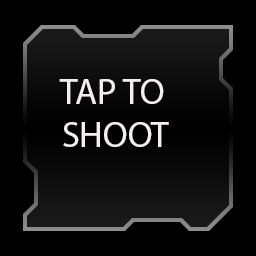
<style>
.page{position:relative;width:256px;height:256px;background:#000000}
.page>*{position:absolute;margin:0}
.t1{font:36px "MyriadPro-Regular";color:#f4eeee}
</style>
<div class="page">
<p class="t1" style="left:59px;top:79px;width:110px;height:68px">TAP TO            <br>    SHOOT</p>
</div>
